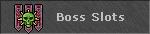
<style>
.page{position:relative;width:150px;height:34px}
.page>*{position:absolute;margin:0}
.t1{font:11.2px "Verdana";letter-spacing:0.1em;color:#c0c0c0;font-weight:bold;scale:0.95 1}
</style>
<div class="page">
<p class="t1" style="left:57px;top:12px;width:67px;height:9px">Boss Slots</p>
</div>
